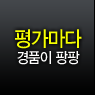
<style>
.page{position:relative;width:95px;height:95px}
.page>*{position:absolute;margin:0}
.t1{font:14.8px/17px "YDIYGO330";letter-spacing:-0.05em;color:#ffffff;scale:0.91 1}
.t2{font:21.2px/17px "YDIYGO330";letter-spacing:-0.05em;color:#f6ff00;scale:0.91 1}
</style>
<div class="page">
<p class="t1" style="left:15px;top:29px;width:67px;height:36px;text-align:center"><span class="t2">평가마다<br></span>경품이 팡팡</p>
</div>
